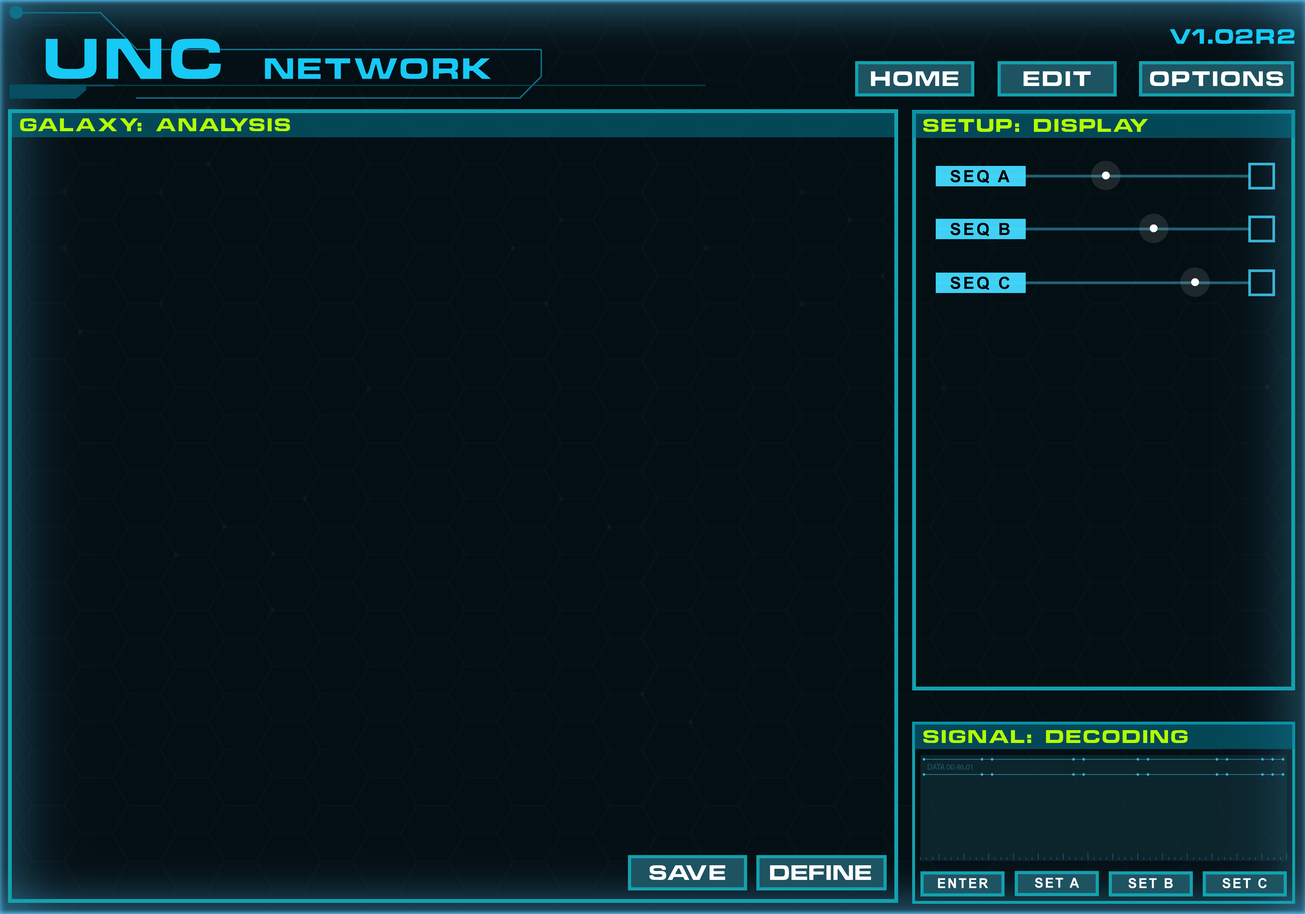
<style>
.page{position:relative;width:1305px;height:914px;background:#040f14}
.page>*{position:absolute;margin:0}
.t1{font:19.1px "ChinoCapsSSK";letter-spacing:0.12em;color:#17c9f5}
.t2{font:26.9px "ChinoCapsSSK";letter-spacing:0.12em;color:#17c9f5}
.t3{font:52.4px "ChinoCapsSSK";letter-spacing:0.12em;color:#17c9f5}
.t4{font:19.2px "ChinoCapsSSK";letter-spacing:0.12em;color:#ffffff}
.t5{font:16.8px "ChinoCapsSSK";letter-spacing:0.12em;color:#b4ff00}
.t6{font:16.8px "Arial-BoldMT";letter-spacing:0.12em;color:#000000}
.t7{font:19.2px "ChinoCapsSSK";letter-spacing:0.1em;color:#ffffff}
.t8{font:19.2px "ChinoCapsSSK";letter-spacing:0.06em;color:#ffffff}
.t9{font:13.6px "Arial-BoldMT";letter-spacing:0.12em;color:#ffffff}
</style>
<div class="page">
<p class="t1" style="left:1169px;top:29px;width:125px;height:15px">V1.02R2</p>
<p class="t2" style="left:46px;top:39px;width:445px;height:40px"><span class="t3">UNC </span>NETWORK</p>
<p class="t4" style="left:870px;top:71px;width:88px;height:15px">HOME</p>
<p class="t4" style="left:1023px;top:71px;width:68px;height:15px">EDIT</p>
<p class="t4" style="left:1149px;top:71px;width:134px;height:15px">OPTIONS</p>
<p class="t5" style="left:20px;top:118px;width:270px;height:13px">GALAXY: ANALYSIS</p>
<p class="t5" style="left:923px;top:119px;width:225px;height:13px">SETUP: DISPLAY</p>
<p class="t6" style="left:950px;top:170px;width:59px;height:13px">SEQ A</p>
<p class="t6" style="left:950px;top:223px;width:59px;height:13px">SEQ B</p>
<p class="t6" style="left:950px;top:276px;width:59px;height:14px">SEQ C</p>
<p class="t5" style="left:923px;top:730px;width:264px;height:13px">SIGNAL: DECODING</p>
<p class="t7" style="left:649px;top:865px;width:76px;height:15px">SAVE</p>
<p class="t8" style="left:770px;top:865px;width:101px;height:15px">DEFINE</p>
<p class="t9" style="left:938px;top:878px;width:50px;height:10px">ENTER</p>
<p class="t9" style="left:1034px;top:878px;width:45px;height:10px">SET A</p>
<p class="t9" style="left:1128px;top:878px;width:44px;height:10px">SET B</p>
<p class="t9" style="left:1222px;top:878px;width:44px;height:10px">SET C</p>
</div>
